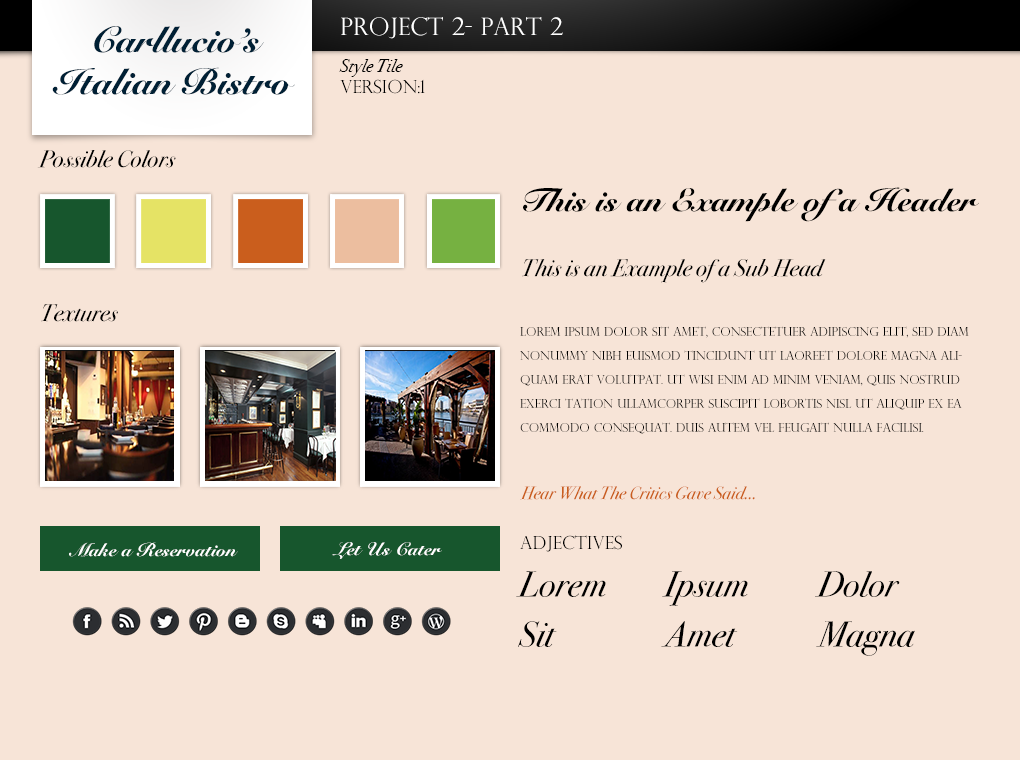
<style>
.page{position:relative;width:1020px;height:760px;background:#f7e4d7}
.page>*{position:absolute;margin:0}
.t1{font:24px "PerpetuaTitlingMT-Light";color:#ffffff}
.t2{font:36px "SnellRoundhand-Black";color:#002035}
.t3{font:18px "BodoniSvtyTwoOSITCTT-BookIt";color:#000000}
.t4{font:36px "ShreeDev0714-Italic";color:#002035}
.t5{font:18px "PerpetuaTitlingMT-Light";color:#000000}
.t6{font:24px "BodoniSvtyTwoOSITCTT-BookIt";color:#000000}
.t7{font:32px "SnellRoundhand-Black";color:#000000}
.t8{font:12px/24px "PerpetuaTitlingMT-Light";color:#000000}
.t9{font:18px "BodoniSvtyTwoOSITCTT-BookIt";color:#ca5e1d}
.t10{font:18px "SnellRoundhand-Black";color:#ffffff}
.t11{font:36px "BodoniSvtyTwoOSITCTT-BookIt";color:#000000}
</style>
<div class="page">
<p class="t1" style="left:341px;top:17px;width:222px;height:22px">Project 2- Part 2</p>
<p class="t2" style="left:94px;top:26px;width:170px;height:27px">Carllucio’s</p>
<p class="t3" style="left:339px;top:59px;width:64px;height:18px">Style Tile</p>
<p class="t2" style="left:52px;top:67px;width:243px;height:28px"><span class="t4"> </span>Italian Bistro</p>
<p class="t5" style="left:340px;top:79px;width:85px;height:15px">version:1</p>
<p class="t6" style="left:37px;top:150px;width:139px;height:18px">Possible Colors</p>
<p class="t7" style="left:523px;top:187px;width:456px;height:35px">This is an Example of a Header</p>
<p class="t6" style="left:522px;top:259px;width:304px;height:24px">This is an Example of a Sub Head</p>
<p class="t6" style="left:41px;top:304px;width:77px;height:18px">Textures</p>
<p class="t8" style="left:520px;top:326px;width:449px;height:108px">Lorem ipsum dolor sit amet, consectetuer adipiscing elit, sed diam nonummy nibh euismod tincidunt ut laoreet dolore magna aliquam erat volutpat. Ut wisi enim ad minim veniam, quis nostrud exerci tation ullamcorper suscipit lobortis nisl ut aliquip ex ea commodo consequat. Duis autem vel feugait nulla facilisi.</p>
<p class="t9" style="left:520px;top:486px;width:235px;height:14px">Hear What The Critics Gave Said...</p>
<p class="t10" style="left:69px;top:542px;width:169px;height:15px">Make a Reservation</p>
<p class="t10" style="left:332px;top:542px;width:110px;height:17px">Let Us Cater</p>
<p class="t5" style="left:520px;top:535px;width:102px;height:17px">Adjectives</p>
<p class="t11" style="left:516px;top:571px;width:90px;height:26px">Lorem</p>
<p class="t11" style="left:662px;top:571px;width:86px;height:35px">Ipsum</p>
<p class="t11" style="left:815px;top:571px;width:85px;height:26px">Dolor</p>
<p class="t11" style="left:518px;top:621px;width:39px;height:26px">Sit</p>
<p class="t11" style="left:661px;top:621px;width:77px;height:26px">Amet</p>
<p class="t11" style="left:816px;top:621px;width:99px;height:35px">Magna</p>
</div>
